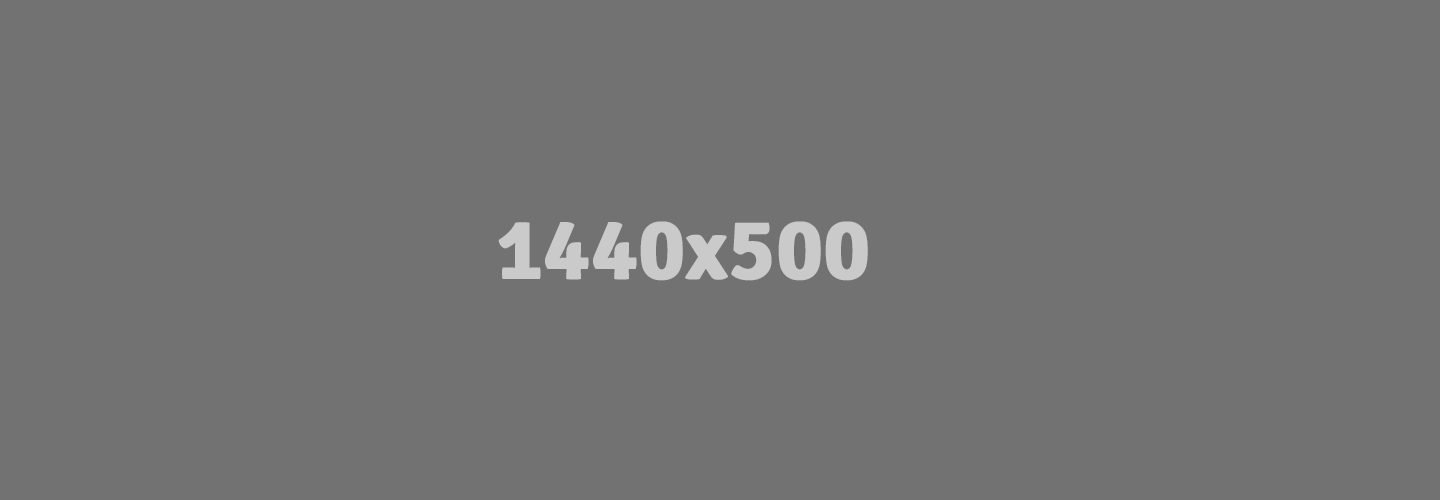
<style>
.page{position:relative;width:1440px;height:500px;background:#727272}
.page>*{position:absolute;margin:0}
.t1{font:85.1px "SignikaNegative-Bold";color:#cacaca;font-weight:bold}
</style>
<div class="page">
<p class="t1" style="left:498px;top:221px;width:370px;height:60px">1440x500</p>
</div>
